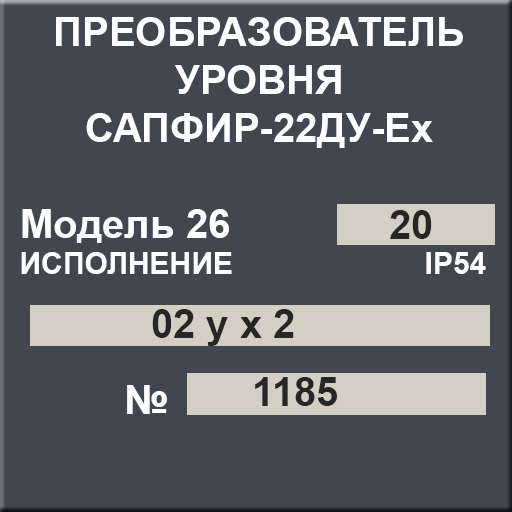
<style>
.page{position:relative;width:512px;height:512px;background:#42464f}
.page>*{position:absolute;margin:0}
.t1{font:40px "Arial-BoldMT";color:#ffffff}
.t2{font:30px "Arial-BoldMT";color:#ffffff}
.t3{font:40px "Arial-BoldMT";color:#262626}
</style>
<div class="page">
<p class="t1" style="left:21px;top:17px;width:465px;height:257px;text-align:center">ПРЕОБРАЗОВАТЕЛЬ УРОВНЯ<br>САПФИР-22ДУ-Ex<br><br>Модель 26<br><span class="t2">ИСПОЛНЕНИЕ                       IP54</span></p>
<p class="t3" style="left:390px;top:210px;width:42px;height:29px">20</p>
<p class="t3" style="left:152px;top:309px;width:142px;height:37px">02 y x 2</p>
<p class="t3" style="left:255px;top:377px;width:82px;height:29px">1185</p>
<p class="t1" style="left:127px;top:385px;width:40px;height:29px">№</p>
</div>
